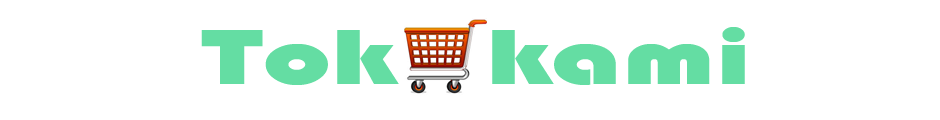
<style>
.page{position:relative;width:940px;height:120px;background:#ffffff}
.page>*{position:absolute;margin:0}
.t1{font:80.6px "Bauhaus93";color:#64dda3;scale:1.5 1}
</style>
<div class="page">
<p class="t1" style="left:201px;top:27px;width:544px;height:58px">Tok   kami</p>
</div>
